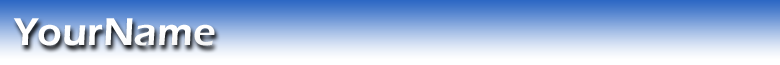
<style>
.page{position:relative;width:780px;height:65px}
.page>*{position:absolute;margin:0}
.t1{font:40px "ErasITC-Demi";color:#ffffff}
</style>
<div class="page">
<p class="t1" style="left:13px;top:18px;width:202px;height:28px">YourName</p>
</div>
